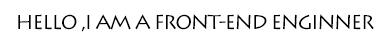
<style>
.page{position:relative;width:391px;height:45px;background:#ffffff}
.page>*{position:absolute;margin:0}
.t1{font:20px "LithosPro-Regular";letter-spacing:-0.075em;color:#000000}
</style>
<div class="page">
<p class="t1" style="left:18px;top:14px;width:356px;height:18px">HELLO ,I AM A FRONT-END ENGINNER</p>
</div>
